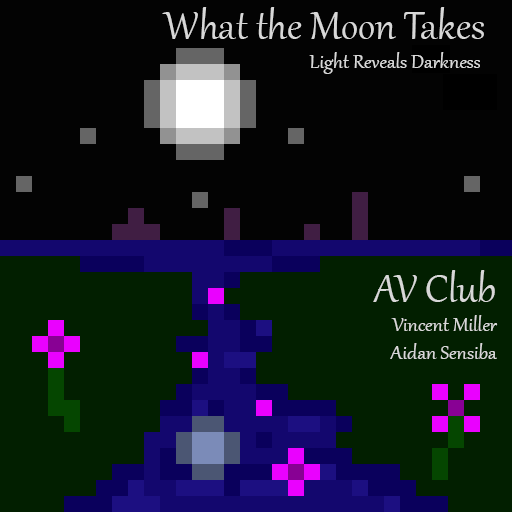
<style>
.page{position:relative;width:512px;height:512px;background:#030303}
.page>*{position:absolute;margin:0}
.t1{font:24px "Gabriola";color:#d8d8d8}
.t2{font:48px "Gabriola";color:#d8d8d8}
</style>
<div class="page">
<p class="t1" style="left:162px;top:7px;width:322px;height:67px;text-align:center"><span class="t2">What the Moon Takes<br>                                             </span>Light Reveals Darkness</p>
<p class="t1" style="left:373px;top:270px;width:125px;height:89px;text-align:right"><span class="t2">AV Club<br></span>Vincent Miller<br>Aidan Sensiba</p>
</div>
